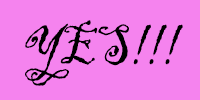
<style>
.page{position:relative;width:200px;height:100px;background:#f583ee}
.page>*{position:absolute;margin:0}
.t1{font:58.2px "BlackadderITC-Regular";color:#000000;scale:0.83 1}
</style>
<div class="page">
<p class="t1" style="left:25px;top:20px;width:158px;height:66px">YES!!!</p>
</div>
